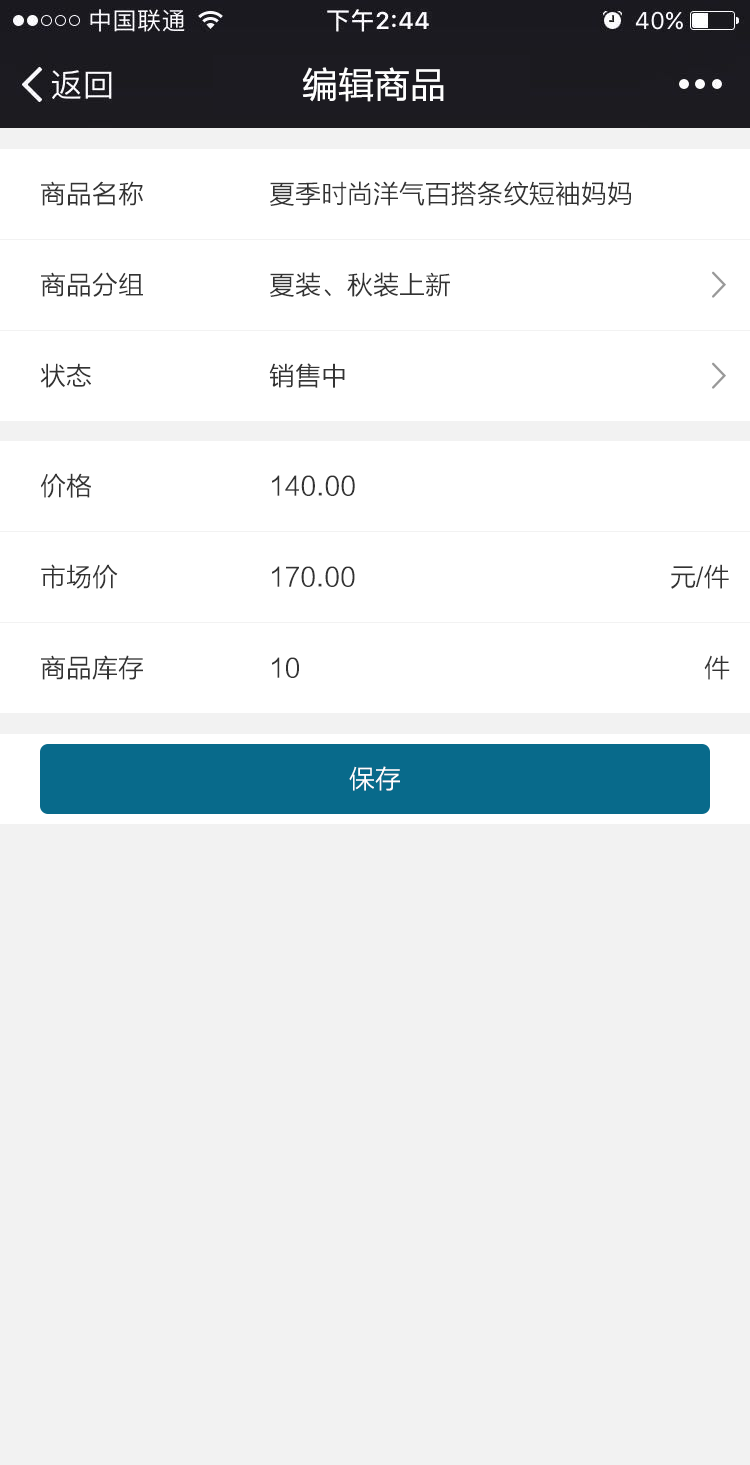
<style>
.page{position:relative;width:750px;height:1465px;background:#f2f2f2}
.page>*{position:absolute;margin:0}
.t1{font:36px "FZLTHK--GBK1-0";color:#ffffff}
.t2{font:26px "FZLTXHK";color:#333333}
.t3{font:26px "FZLTXHK";color:#ffffff}
</style>
<div class="page">
<p class="t1" style="left:302px;top:67px;width:142px;height:35px">编辑商品</p>
<p class="t2" style="left:41px;top:181px;width:102px;height:25px">商品名称</p>
<p class="t2" style="left:41px;top:181px;width:102px;height:25px">商品名称</p>
<p class="t2" style="left:270px;top:181px;width:361px;height:25px">夏季时尚洋气百搭条纹短袖妈妈</p>
<p class="t2" style="left:270px;top:181px;width:361px;height:25px">夏季时尚洋气百搭条纹短袖妈妈</p>
<p class="t2" style="left:41px;top:272px;width:102px;height:25px">商品分组</p>
<p class="t2" style="left:270px;top:272px;width:180px;height:25px">夏装、秋装上新</p>
<p class="t2" style="left:40px;top:363px;width:51px;height:25px">状态</p>
<p class="t2" style="left:269px;top:363px;width:76px;height:25px">销售中</p>
<p class="t2" style="left:41px;top:473px;width:50px;height:25px">价格</p>
<p class="t2" style="left:272px;top:475px;width:83px;height:21px">140.00</p>
<p class="t2" style="left:41px;top:564px;width:77px;height:25px">市场价</p>
<p class="t2" style="left:272px;top:566px;width:83px;height:21px">170.00</p>
<p class="t2" style="left:671px;top:564px;width:58px;height:25px">元/件</p>
<p class="t2" style="left:41px;top:655px;width:102px;height:25px">商品库存</p>
<p class="t2" style="left:272px;top:657px;width:27px;height:21px">10</p>
<p class="t2" style="left:704px;top:655px;width:26px;height:25px">件</p>
<p class="t3" style="left:349px;top:766px;width:51px;height:25px">保存</p>
</div>
